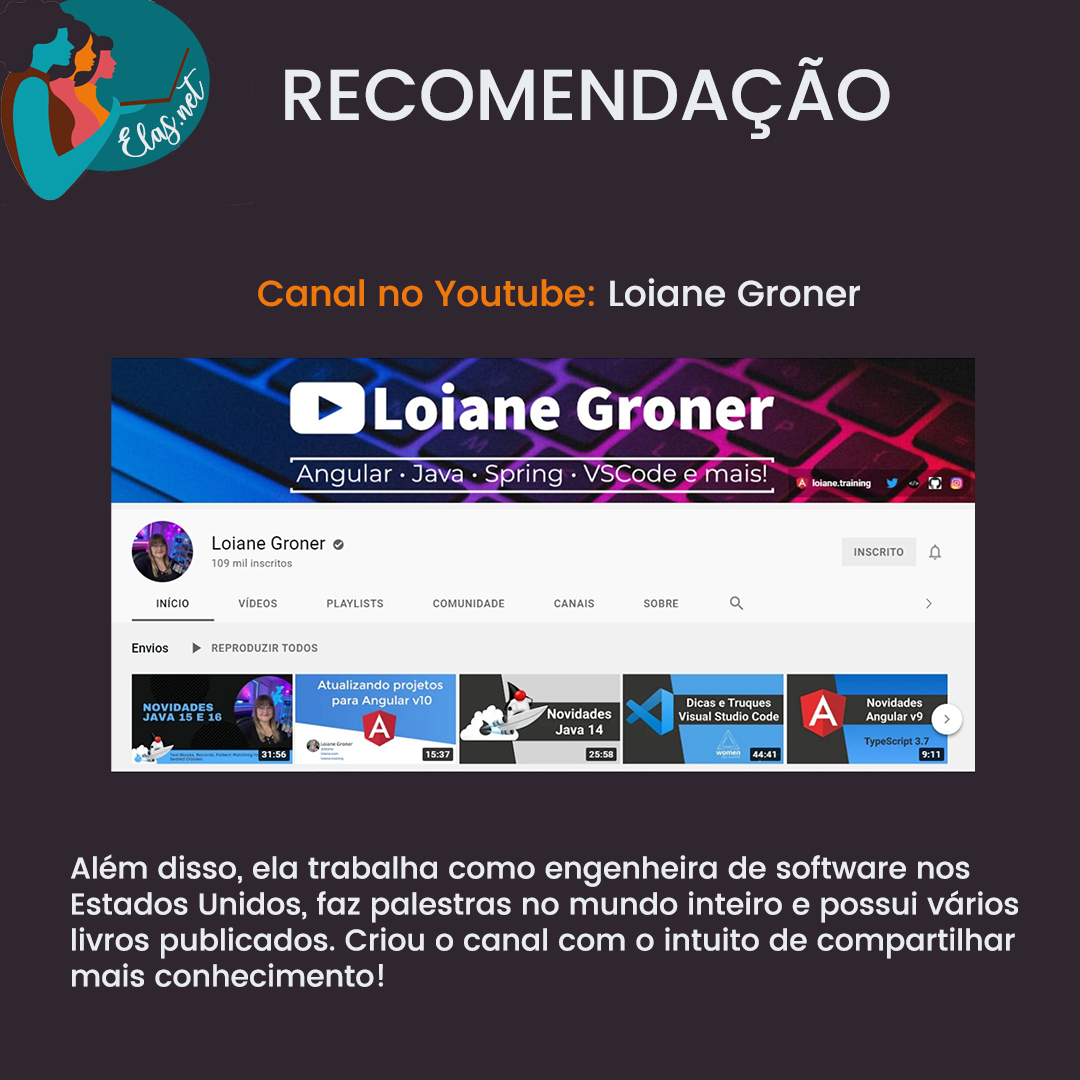
<style>
.page{position:relative;width:1080px;height:1080px;background:#2f262f}
.page>*{position:absolute;margin:0}
.t1{font:72px "Poppins-Medium";color:#e9edf0}
.t2{font:25px "charlinda-Regular";color:#e9edf0;scale:1.18 1}
.t3{font:36px "Poppins-Medium";color:#ef780d}
.t4{font:36px "Poppins-Medium";color:#e9edf0}
.t5{font:30px "Poppins-Medium";color:#e9edf0}
</style>
<div class="page">
<p class="t1" style="left:285px;top:57px;width:605px;height:82px">RECOMENDAÇÃO</p>
<p class="t2" style="left:118px;top:68px;width:86px;height:89px;rotate:-43deg">Elas.net</p>
<p class="t3" style="left:258px;top:278px;width:602px;height:29px">Canal no Youtube: <span class="t4">Loiane Groner</span></p>
<p class="t5" style="left:71px;top:854px;width:947px;height:133px">Além disso, ela trabalha como engenheira de software nos <br>Estados Unidos, faz palestras no mundo inteiro e possui vários <br>livros publicados. Criou o canal com o intuito de compartilhar <br>mais conhecimento!</p>
</div>
